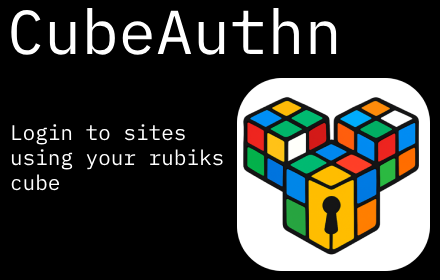
<style>
.page{position:relative;width:440px;height:280px;background:#000000}
.page>*{position:absolute;margin:0}
.t1{font:62px "IBMPlexMono-Regular";color:#ffffff}
.t2{font:21px "IBMPlexMono-Regular";color:#ffffff}
</style>
<div class="page">
<p class="t1" style="left:11px;top:8px;width:326px;height:47px">CubeAuthn</p>
<p class="t2" style="left:11px;top:124px;width:212px;height:67px">Login to sites using your rubiks cube</p>
</div>
